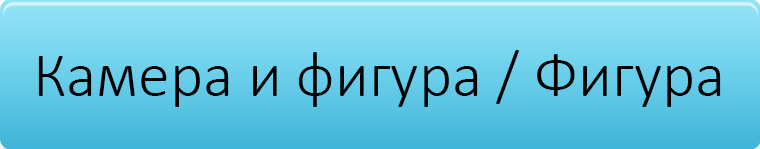
<style>
.page{position:relative;width:760px;height:149px}
.page>*{position:absolute;margin:0}
.t1{font:64px "Calibri-Light";color:#000000}
</style>
<div class="page">
<p class="t1" style="left:38px;top:50px;width:683px;height:57px">Камера и фигура / Фигура</p>
</div>
